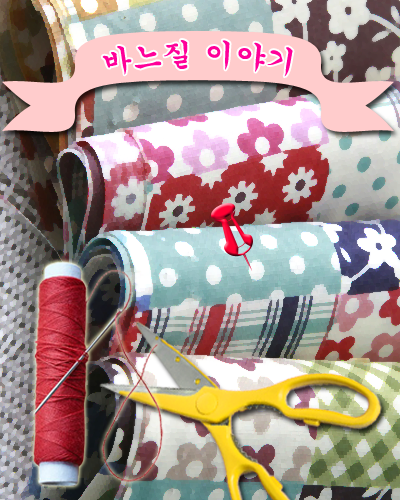
<style>
.page{position:relative;width:400px;height:500px}
.page>*{position:absolute;margin:0}
.t1{font:30px "Gungsuh";color:#ff0099}
</style>
<div class="page">
<p class="t1" style="left:102px;top:40px;width:191px;height:37px">바느질 이야기</p>
</div>
